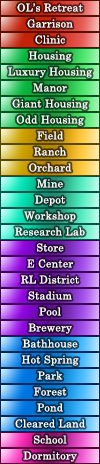
<style>
.page{position:relative;width:100px;height:464px}
.page>*{position:absolute;margin:0}
.t1{font:10.7px "CenturySchoolbook";letter-spacing:0.025em;color:#ffffff}
</style>
<div class="page">
<p class="t1" style="left:17px;top:3px;width:66px;height:9px">OL’s Retreat</p>
<p class="t1" style="left:27px;top:19px;width:46px;height:9px">Garrison</p>
<p class="t1" style="left:35px;top:35px;width:30px;height:9px">Clinic</p>
<p class="t1" style="left:29px;top:51px;width:43px;height:11px">Housing</p>
<p class="t1" style="left:8px;top:67px;width:84px;height:11px">Luxury Housing</p>
<p class="t1" style="left:33px;top:83px;width:34px;height:9px">Manor</p>
<p class="t1" style="left:12px;top:99px;width:76px;height:11px">Giant Housing</p>
<p class="t1" style="left:16px;top:115px;width:68px;height:11px">Odd Housing</p>
<p class="t1" style="left:37px;top:131px;width:26px;height:9px">Field</p>
<p class="t1" style="left:34px;top:147px;width:32px;height:9px">Ranch</p>
<p class="t1" style="left:29px;top:163px;width:43px;height:9px">Orchard</p>
<p class="t1" style="left:37px;top:179px;width:26px;height:9px">Mine</p>
<p class="t1" style="left:35px;top:195px;width:30px;height:11px">Depot</p>
<p class="t1" style="left:24px;top:211px;width:52px;height:11px">Workshop</p>
<p class="t1" style="left:15px;top:227px;width:70px;height:9px">Research Lab</p>
<p class="t1" style="left:37px;top:243px;width:27px;height:9px">Store</p>
<p class="t1" style="left:27px;top:259px;width:46px;height:9px">E Center</p>
<p class="t1" style="left:21px;top:275px;width:58px;height:9px">RL District</p>
<p class="t1" style="left:28px;top:291px;width:44px;height:9px">Stadium</p>
<p class="t1" style="left:39px;top:307px;width:22px;height:9px">Pool</p>
<p class="t1" style="left:28px;top:323px;width:44px;height:11px">Brewery</p>
<p class="t1" style="left:22px;top:339px;width:56px;height:9px">Bathhouse</p>
<p class="t1" style="left:22px;top:355px;width:57px;height:11px">Hot Spring</p>
<p class="t1" style="left:37px;top:371px;width:26px;height:9px">Park</p>
<p class="t1" style="left:34px;top:387px;width:33px;height:9px">Forest</p>
<p class="t1" style="left:37px;top:403px;width:26px;height:9px">Pond</p>
<p class="t1" style="left:15px;top:419px;width:70px;height:9px">Cleared Land</p>
<p class="t1" style="left:34px;top:435px;width:33px;height:9px">School</p>
<p class="t1" style="left:23px;top:451px;width:54px;height:11px">Dormitory</p>
</div>
